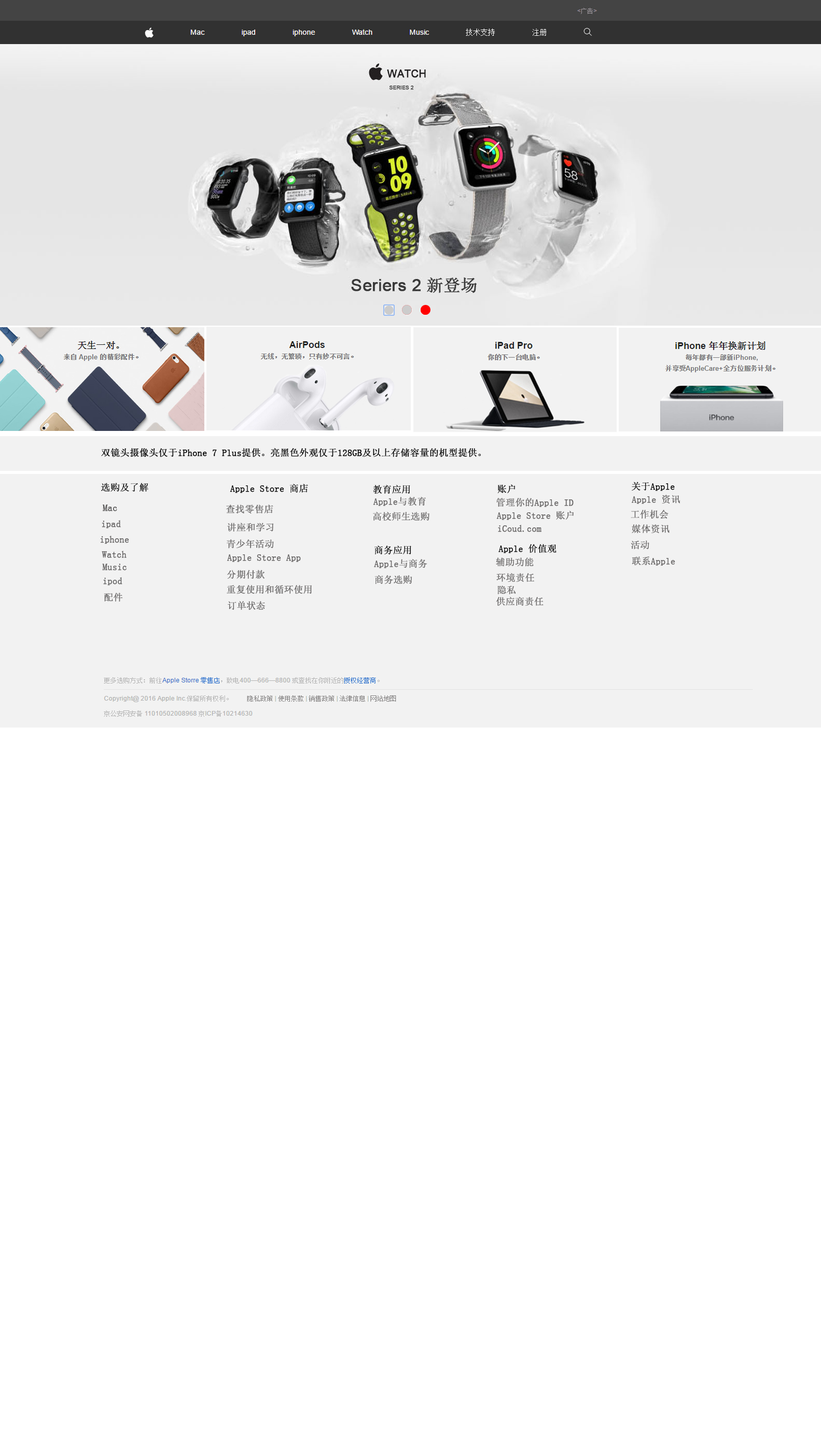
<style>
.page{position:relative;width:821px;height:1452px;background:#ffffff}
.page>*{position:absolute;margin:0}
.t1{font:9.3px "SimSun";color:#000000;font-weight:bold}
.t2{font:9.3px "SimSun";color:#010101;font-weight:bold}
.t3{font:9.3px "SimSun";color:#686666;font-weight:bold}
.t4{font:9.3px "SimSun";color:#5b5a5a;font-weight:bold}
.t5{font:9.3px "SimSun";color:#666666;font-weight:bold}
</style>
<div class="page">
<p class="t1" style="left:101px;top:448px;width:380px;height:9px">双镜头摄像头仅于iPhone 7 Plus提供。亮黑色外观仅于128GB及以上存储容量的机型提供。</p>
<p class="t1" style="left:101px;top:483px;width:47px;height:9px">选购及了解</p>
<p class="t1" style="left:230px;top:484px;width:78px;height:9px">Apple Store 商店</p>
<p class="t1" style="left:373px;top:485px;width:37px;height:9px">教育应用</p>
<p class="t2" style="left:497px;top:484px;width:19px;height:9px">账户</p>
<p class="t1" style="left:632px;top:482px;width:43px;height:9px">关于Apple</p>
<p class="t3" style="left:373px;top:497px;width:53px;height:9px">Apple与教育</p>
<p class="t3" style="left:496px;top:498px;width:78px;height:9px">管理你的Apple ID</p>
<p class="t3" style="left:632px;top:495px;width:48px;height:9px">Apple 资讯</p>
<p class="t4" style="left:103px;top:505px;width:14px;height:6px">Mac</p>
<p class="t3" style="left:226px;top:505px;width:47px;height:9px">查找零售店</p>
<p class="t3" style="left:631px;top:510px;width:38px;height:9px">工作机会</p>
<p class="t3" style="left:102px;top:520px;width:19px;height:9px">ipad</p>
<p class="t3" style="left:373px;top:512px;width:56px;height:9px">高校师生选购</p>
<p class="t3" style="left:496px;top:511px;width:78px;height:9px">Apple Store 账户</p>
<p class="t3" style="left:227px;top:523px;width:47px;height:9px">讲座和学习</p>
<p class="t3" style="left:498px;top:525px;width:43px;height:7px">iCoud.com</p>
<p class="t3" style="left:632px;top:524px;width:38px;height:10px">媒体资讯</p>
<p class="t3" style="left:101px;top:536px;width:28px;height:8px">iphone</p>
<p class="t3" style="left:227px;top:539px;width:47px;height:10px">青少年活动</p>
<p class="t1" style="left:374px;top:546px;width:37px;height:9px">商务应用</p>
<p class="t1" style="left:498px;top:544px;width:59px;height:9px">Apple 价值观</p>
<p class="t3" style="left:631px;top:540px;width:18px;height:9px">活动</p>
<p class="t3" style="left:102px;top:551px;width:25px;height:7px">Watch</p>
<p class="t3" style="left:227px;top:554px;width:74px;height:8px">Apple Store App</p>
<p class="t3" style="left:496px;top:558px;width:38px;height:8px">辅助功能</p>
<p class="t3" style="left:632px;top:557px;width:43px;height:9px">联系Apple</p>
<p class="t3" style="left:102px;top:564px;width:25px;height:7px">Music</p>
<p class="t3" style="left:374px;top:559px;width:53px;height:9px">Apple与商务</p>
<p class="t5" style="left:103px;top:577px;width:19px;height:9px">ipod</p>
<p class="t3" style="left:227px;top:570px;width:38px;height:9px">分期付款</p>
<p class="t3" style="left:374px;top:575px;width:38px;height:10px">商务选购</p>
<p class="t3" style="left:496px;top:573px;width:38px;height:9px">环境责任</p>
<p class="t3" style="left:104px;top:593px;width:19px;height:9px">配件</p>
<p class="t3" style="left:227px;top:585px;width:85px;height:9px">重复使用和循环使用</p>
<p class="t3" style="left:497px;top:586px;width:19px;height:8px">隐私</p>
<p class="t3" style="left:228px;top:601px;width:37px;height:9px">订单状态</p>
<p class="t3" style="left:496px;top:597px;width:48px;height:9px">供应商责任</p>
</div>
